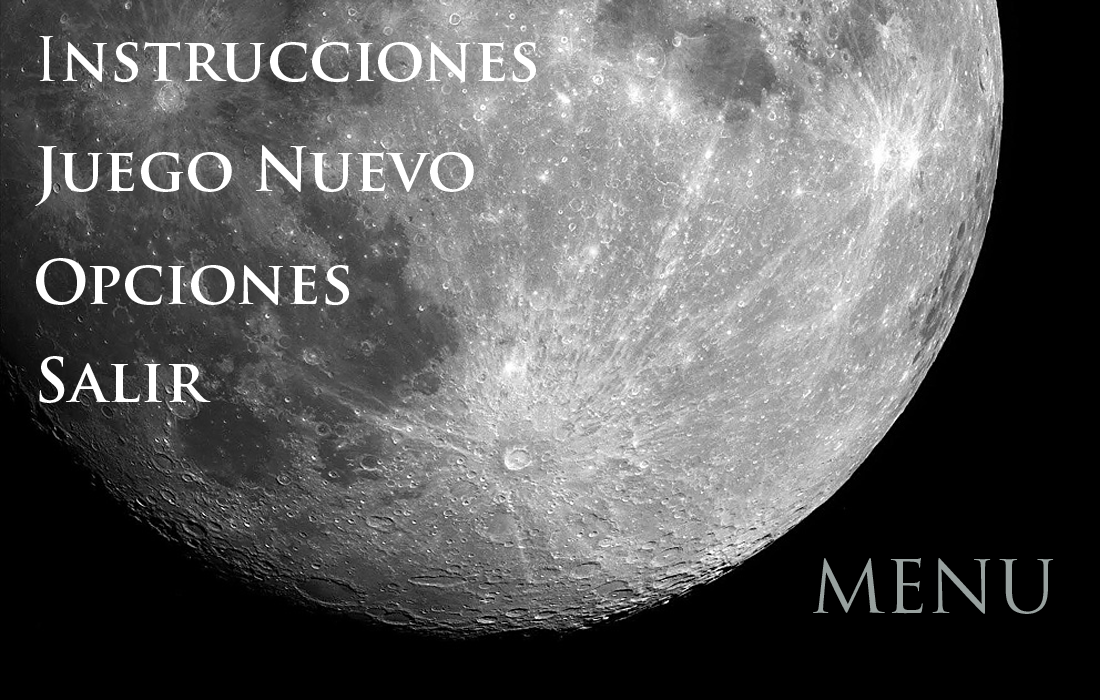
<style>
.page{position:relative;width:1100px;height:700px;background:#000000}
.page>*{position:absolute;margin:0}
.t1{font:60px "TrajanPro-Bold";color:#ffffff}
.t2{font:60px "TrajanPro-Regular";color:#ffffff}
.t3{font:72px "TrajanPro-Regular";color:#98a19f}
</style>
<div class="page">
<p class="t1" style="left:39px;top:36px;width:497px;height:46px"><span class="t2">I</span>nstrucciones</p>
<p class="t1" style="left:35px;top:145px;width:439px;height:61px">Juego Nuevo</p>
<p class="t1" style="left:36px;top:258px;width:313px;height:47px">Opciones</p>
<p class="t1" style="left:39px;top:356px;width:172px;height:47px">Salir</p>
<p class="t3" style="left:813px;top:558px;width:241px;height:56px">MENU</p>
</div>
